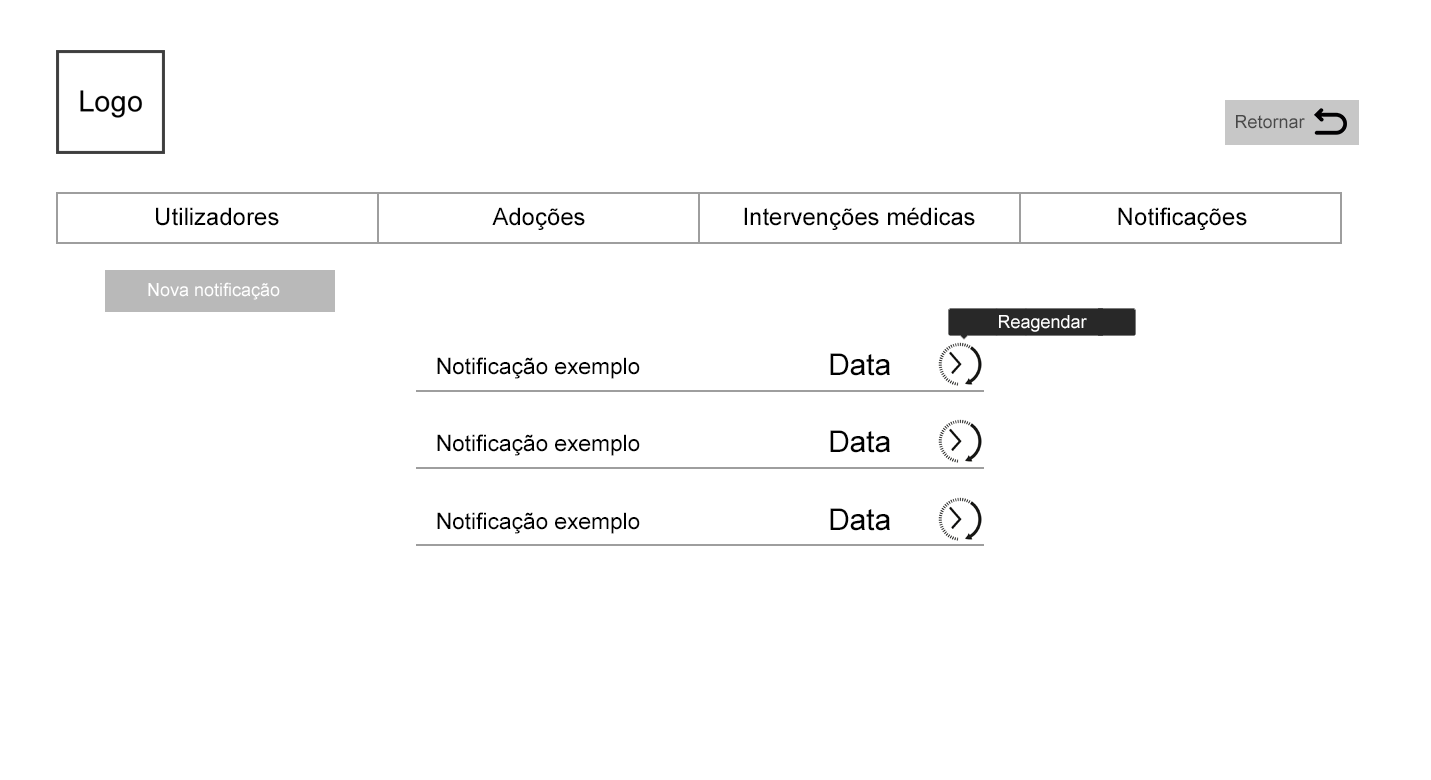
<style>
.page{position:relative;width:1431px;height:780px;background:#ffffff}
.page>*{position:absolute;margin:0}
.t1{font:18px "ArialMT";color:#484848}
.t2{font:24px "ArialMT";color:#000000}
.t3{font:18px "ArialMT";color:#ffffff}
.t4{font:30px "ArialMT";color:#000000}
.t5{font:22.7px "ArialMT";color:#000000}
</style>
<div class="page">
<p class="t1" style="left:1236px;top:115px;width:69px;height:14px">Retornar</p>
<p class="t2" style="left:156px;top:207px;width:123px;height:19px">Utilizadores</p>
<p class="t2" style="left:492px;top:207px;width:93px;height:23px">Adoções</p>
<p class="t2" style="left:744px;top:207px;width:231px;height:23px">Intervenções médicas</p>
<p class="t2" style="left:1118px;top:207px;width:129px;height:23px">Notificações</p>
<p class="t3" style="left:148px;top:282px;width:132px;height:18px">Nova notificação</p>
<p class="t3" style="left:999px;top:315px;width:88px;height:17px">Reagendar</p>
<p class="t4" style="left:830px;top:353px;width:60px;height:23px">Data</p>
<p class="t5" style="left:437px;top:357px;width:203px;height:22px">Notificação exemplo</p>
<p class="t5" style="left:437px;top:434px;width:203px;height:22px">Notificação exemplo</p>
<p class="t4" style="left:830px;top:430px;width:60px;height:23px">Data</p>
<p class="t4" style="left:830px;top:508px;width:60px;height:23px">Data</p>
<p class="t5" style="left:437px;top:512px;width:203px;height:22px">Notificação exemplo</p>
</div>
